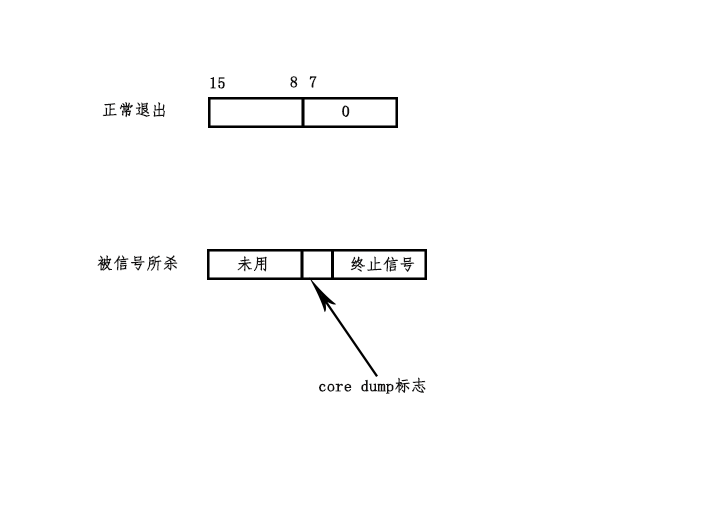
<style>
.page{position:relative;width:709px;height:510px;background:#ffffff}
.page>*{position:absolute;margin:0}
.t1{font:16px "FangSong";color:#111010;font-weight:bold}
</style>
<div class="page">
<p class="t1" style="left:210px;top:77px;width:15px;height:12px">15</p>
<p class="t1" style="left:290px;top:76px;width:8px;height:12px">8</p>
<p class="t1" style="left:309px;top:76px;width:8px;height:12px">7</p>
<p class="t1" style="left:102px;top:102px;width:63px;height:16px">正常退出</p>
<p class="t1" style="left:342px;top:105px;width:8px;height:12px">0</p>
<p class="t1" style="left:97px;top:255px;width:81px;height:16px">被信号所杀</p>
<p class="t1" style="left:237px;top:256px;width:30px;height:16px">未用</p>
<p class="t1" style="left:350px;top:256px;width:65px;height:16px">终止信号</p>
<p class="t1" style="left:319px;top:377px;width:107px;height:17px">core dump标志</p>
</div>
